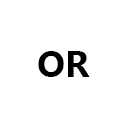
<style>
.page{position:relative;width:128px;height:128px;background:#ffffff}
.page>*{position:absolute;margin:0}
.t1{font:36.9px "Gadugi-Bold";color:#000000}
</style>
<div class="page">
<p class="t1" style="left:38px;top:51px;width:52px;height:26px">OR</p>
</div>
